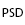
<style>
.page{position:relative;width:25px;height:25px;background:#ffffff}
.page>*{position:absolute;margin:0}
.t1{font:12.5px "MyriadPro-Regular";color:#000000}
</style>
<div class="page">
<p class="t1" style="left:2px;top:8px;width:21px;height:9px">PSD</p>
</div>
